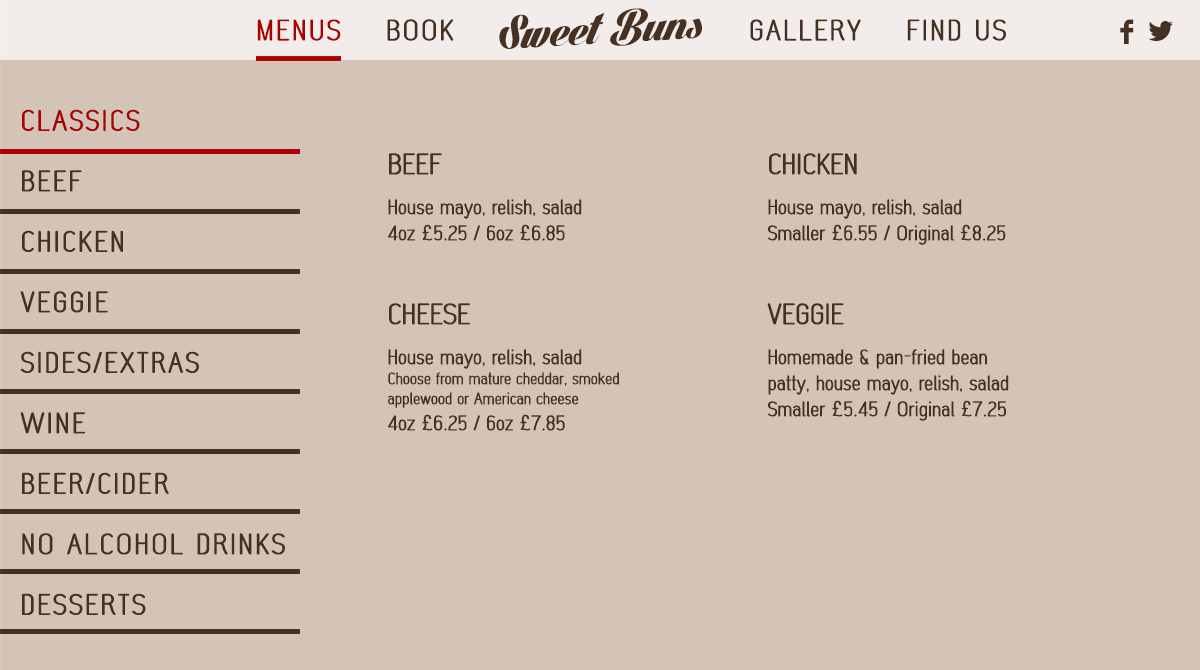
<style>
.page{position:relative;width:1200px;height:670px;background:#d3c4b7}
.page>*{position:absolute;margin:0}
.t1{font:49px "LighthousePersonalUse";color:#463021}
.t2{font:28px "MonaBella";letter-spacing:0.08em;color:#aa0000;text-transform:uppercase}
.t3{font:28px "MonaBella";letter-spacing:0.08em;color:#463021;text-transform:uppercase}
.t4{font:40px "Socialico";letter-spacing:0.2em;color:#463021}
.t5{font:42px "Socialico";letter-spacing:0.2em;color:#463021}
.t6{font:28px/60.5px "MonaBella";letter-spacing:0.08em;color:#463121;text-transform:uppercase}
.t7{font:28px/60.5px "MonaBella";letter-spacing:0.08em;color:#aa0000;text-transform:uppercase}
.t8{font:20px/26px "MonaBella";color:#463021}
.t9{font:28px/40px "MonaBella";color:#463021;text-transform:uppercase}
.t10{font:20px/40px "MonaBella";color:#463021}
.t11{font:20px/26px "MinionPro-Regular";color:#463021}
.t12{font:16px/20px "MonaBella";color:#463021}
</style>
<div class="page">
<p class="t1" style="left:499px;top:8px;width:203px;height:41px;rotate:-3deg">Sweet Buns</p>
<p class="t2" style="left:257px;top:19px;width:197px;height:22px">Menus<span class="t3">    Book</span></p>
<p class="t3" style="left:750px;top:19px;width:256px;height:22px">Gallery    Find us</p>
<p class="t4" style="left:1120px;top:19px;width:53px;height:25px">F<span class="t5">L</span></p>
<p class="t6" style="left:20px;top:109px;width:265px;height:506px"><span class="t7">Classics<br></span>Beef<br>Chicken<br>Veggie<br>Sides/extras<br>Wine<br>Beer/cider<br>no alcohol drinks<br>Desserts</p>
<p class="t8" style="left:388px;top:153px;width:194px;height:88px"><span class="t9">BEEF <br></span><span class="t10">H</span>ouse mayo, relish, salad<br>4oz £5<span class="t11">.</span>25 / 6oz £6<span class="t11">.</span>85</p>
<p class="t8" style="left:767px;top:153px;width:239px;height:92px"><span class="t9">Chicken<br></span><span class="t10">H</span>ouse mayo, relish, salad<br>Smaller £6<span class="t11">.</span>55 / Original £8<span class="t11">.</span>25</p>
<p class="t12" style="left:388px;top:303px;width:231px;height:128px"><span class="t9">Cheese<br></span><span class="t10">H</span><span class="t8">ouse mayo, relish, salad<br></span>Choose from mature cheddar, smoked applewood or American cheese<br><span class="t8">4oz £6</span><span class="t11">.</span><span class="t8">25 / 6oz £7</span><span class="t11">.</span><span class="t8">85</span></p>
<p class="t8" style="left:767px;top:303px;width:242px;height:118px"><span class="t9">Veggie<br></span><span class="t10">Homemade &amp; pan-fried </span>bean patty, house mayo, relish, salad<br>Smaller £5<span class="t11">.</span>45 / Original £7<span class="t11">.</span>25</p>
</div>
